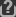
<style>
.page{position:relative;width:16px;height:17px;background:#333333}
.page>*{position:absolute;margin:0}
.t1{font:18px "HelveticaNeueLTCom-BdCn";color:#aeaeae;scale:1.15 1}
</style>
<div class="page">
<p class="t1" style="left:3px;top:0px;width:10px;height:13px">?</p>
</div>
